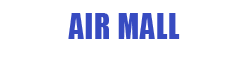
<style>
.page{position:relative;width:250px;height:60px;background:#ffffff}
.page>*{position:absolute;margin:0}
.t1{font:33px "Impact";letter-spacing:0.03em;color:#374bc1;scale:0.91 1}
</style>
<div class="page">
<p class="t1" style="left:68px;top:13px;width:112px;height:26px">AIR MALL</p>
</div>
